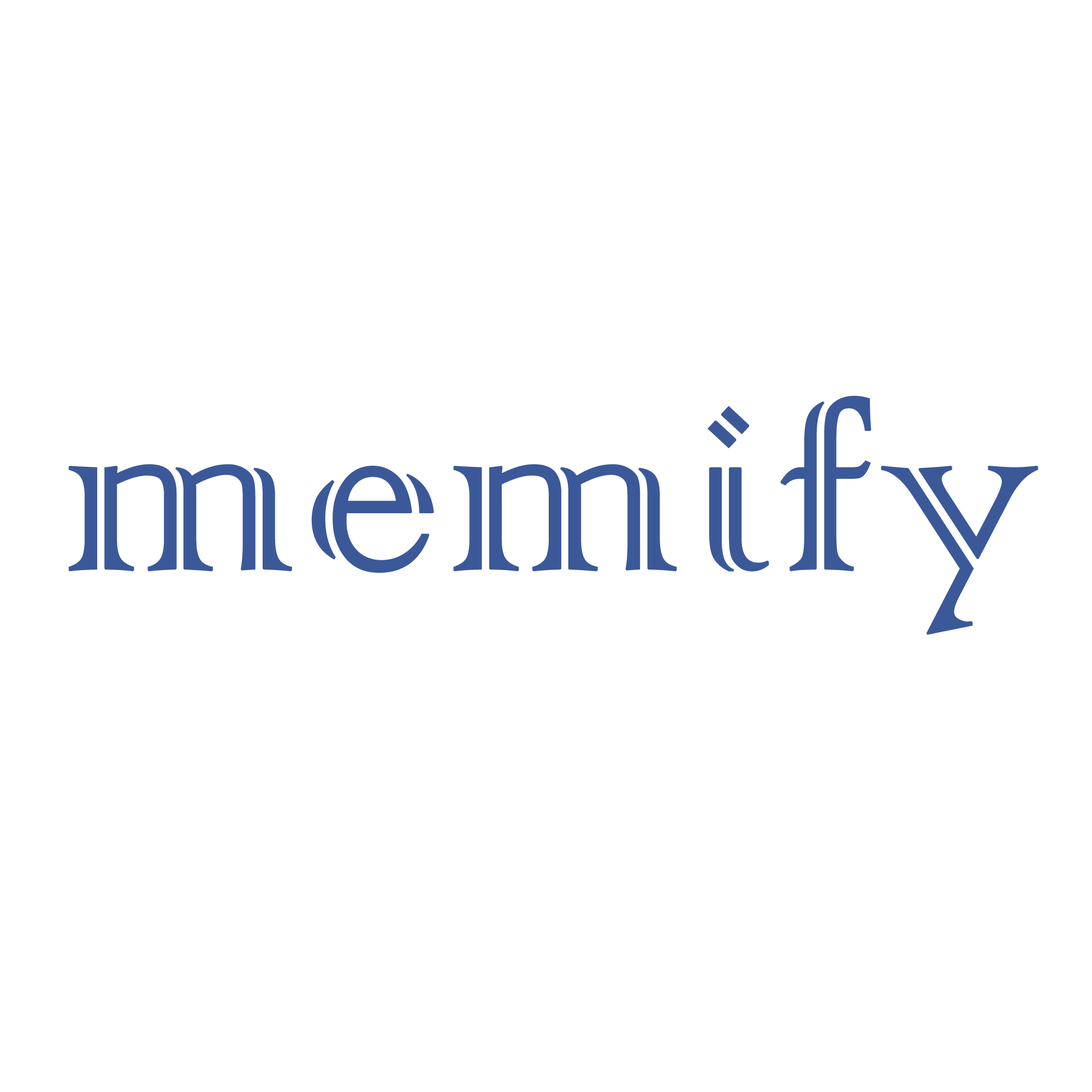
<style>
.page{position:relative;width:1092px;height:1092px;background:#ffffff}
.page>*{position:absolute;margin:0}
.t1{font:288.2px "ColonnaMT";color:#3b5999;font-weight:bold}
</style>
<div class="page">
<p class="t1" style="left:68px;top:396px;width:970px;height:239px">memify</p>
</div>
